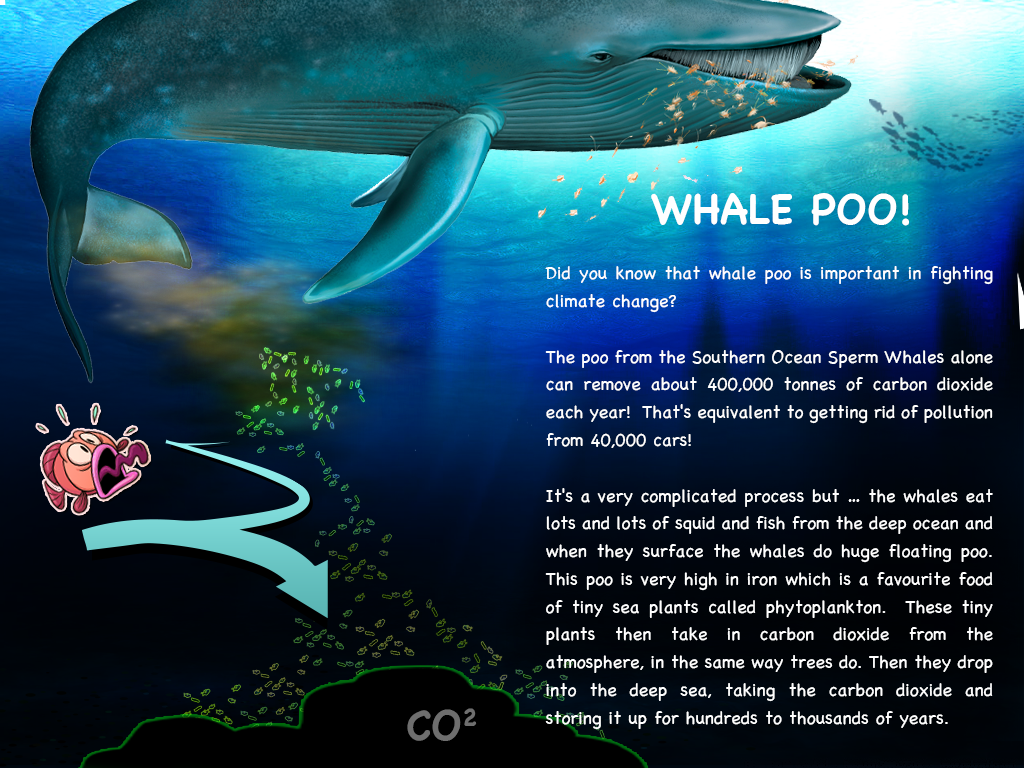
<style>
.page{position:relative;width:1024px;height:768px}
.page>*{position:absolute;margin:0}
.t1{font:41.7px "Chalkboard-Bold";color:#ffffff}
.t2{font:18.1px/27.8px "Chalkboard";color:#ffffff}
</style>
<div class="page">
<p class="t1" style="left:651px;top:193px;width:258px;height:33px">WHALE POO!</p>
<p class="t2" style="left:545px;top:266px;width:448px;height:464px;text-align:justify">Did you know that whale poo is important in fighting climate change?<br><br>The poo from the Southern Ocean Sperm Whales alone can remove about 400,000 tonnes of carbon dioxide each year!  That's equivalent to getting rid of pollution from 40,000 cars!<br><br>It's a very complicated process but … the whales eat lots and lots of squid and fish from the deep ocean and when they surface the whales do huge floating poo.  This poo is very high in iron which is a favourite food of tiny sea plants called phytoplankton.  These tiny plants then take in carbon dioxide from the atmosphere, in the same way trees do. Then they drop into the deep sea, taking the carbon dioxide and storing it up for hundreds to thousands of years.</p>
</div>
